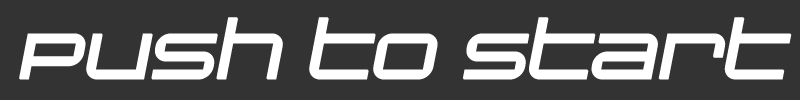
<style>
.page{position:relative;width:800px;height:100px;background:#333333}
.page>*{position:absolute;margin:0}
.t1{font:79.2px "ChangelingNeo";color:#ffffff;font-weight:bold;font-style:italic}
</style>
<div class="page">
<p class="t1" style="left:19px;top:17px;width:773px;height:63px">Push to Start</p>
</div>
